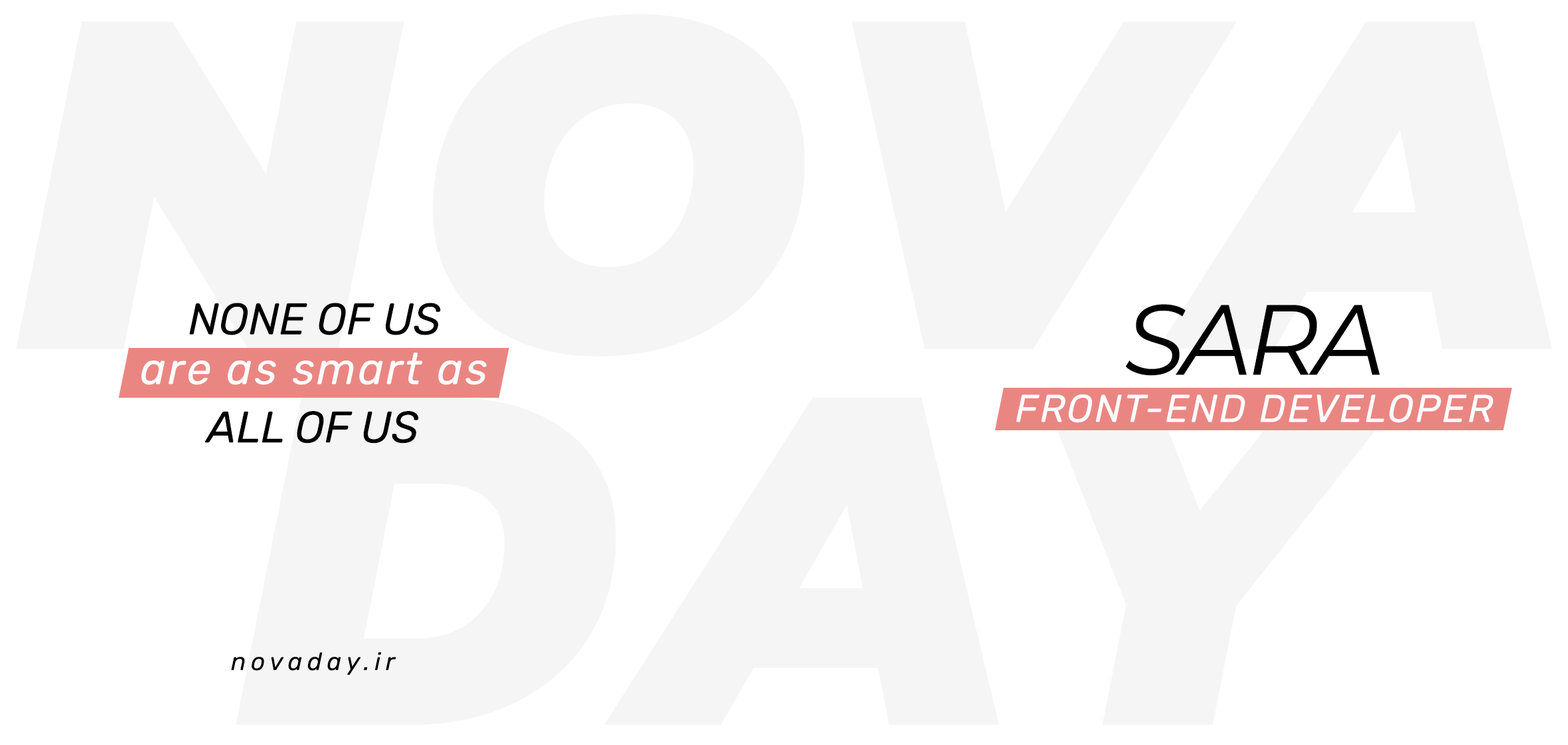
<style>
.page{position:relative;width:1568px;height:745px;background:#ffffff}
.page>*{position:absolute;margin:0}
.t1{font:44.3px "Rubik-Italic";color:#000000}
.t2{font:99.6px "Montserrat-Italic";letter-spacing:-0.05em;color:#000000}
.t3{font:44.3px "Rubik-Italic";letter-spacing:0.05em;color:#ffffff}
.t4{font:38.7px "Rubik-Italic";letter-spacing:0.05em;color:#ffffff}
.t5{font:24.9px "Rubik-Italic";letter-spacing:0.2em;color:#000000}
</style>
<div class="page">
<p class="t1" style="left:189px;top:303px;width:252px;height:32px">NONE OF US</p>
<p class="t2" style="left:1125px;top:304px;width:255px;height:72px">SARA</p>
<p class="t3" style="left:141px;top:353px;width:346px;height:32px">are as smart as</p>
<p class="t4" style="left:1016px;top:394px;width:477px;height:29px">FRONT-END DEVELOPER</p>
<p class="t1" style="left:205px;top:411px;width:214px;height:32px">ALL OF US</p>
<p class="t5" style="left:231px;top:652px;width:165px;height:23px">novaday.ir</p>
</div>
